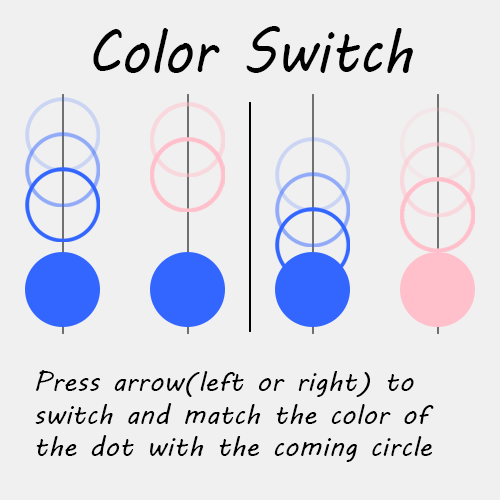
<style>
.page{position:relative;width:500px;height:500px;background:#f0f0f0}
.page>*{position:absolute;margin:0}
.t1{font:60px "MVBoli";color:#000000;scale:0.92 1}
.t2{font:27.3px "MVBoli";color:#000000}
</style>
<div class="page">
<p class="t1" style="left:93px;top:26px;width:320px;height:47px">Color Switch</p>
<p class="t2" style="left:35px;top:370px;width:399px;height:92px;text-align:right">Press arrow(left or right) to switch and match the color of the dot with the coming circle<br>lightning</p>
</div>
